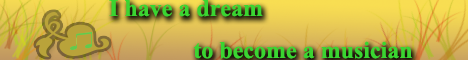
<style>
.page{position:relative;width:468px;height:60px}
.page>*{position:absolute;margin:0}
.t1{font:24px "TimesNewRomanPS-BoldMT";color:#3ad531}
</style>
<div class="page">
<p class="t1" style="left:109px;top:0px;width:303px;height:59px;text-align:center">I have a dream<br>                                       to become a musician</p>
</div>
